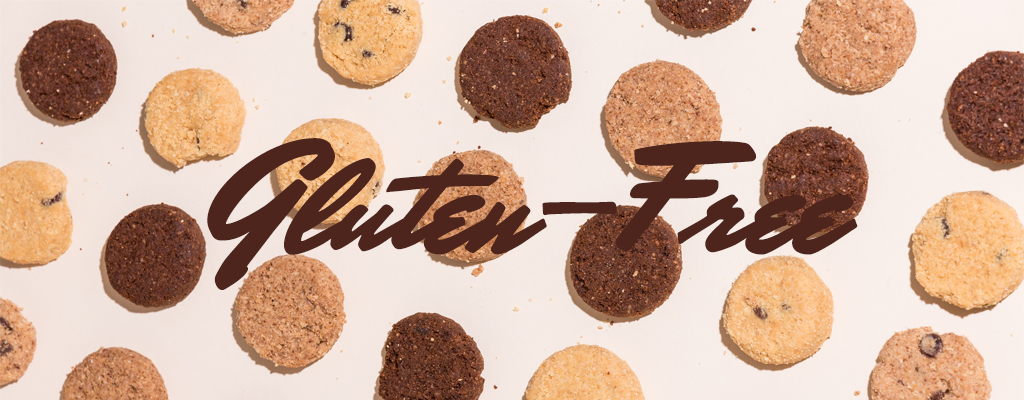
<style>
.page{position:relative;width:1024px;height:400px}
.page>*{position:absolute;margin:0}
.t1{font:150px "MrStalwartPro";color:#4d251c}
</style>
<div class="page">
<p class="t1" style="left:207px;top:138px;width:651px;height:152px">Gluten-Free</p>
</div>
